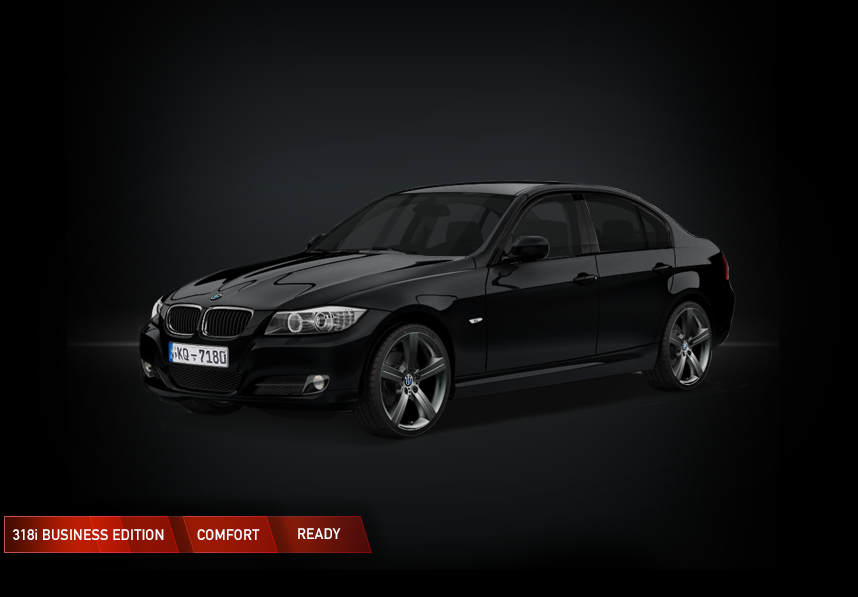
<style>
.page{position:relative;width:858px;height:597px}
.page>*{position:absolute;margin:0}
.t1{font:15px "DINAlternate-Bold";color:#ffffff}
</style>
<div class="page">
<p class="t1" style="left:13px;top:529px;width:151px;height:11px">318i BUSINESS EDITION</p>
<p class="t1" style="left:197px;top:529px;width:63px;height:11px">COMFORT</p>
<p class="t1" style="left:298px;top:528px;width:43px;height:11px">READY</p>
</div>
